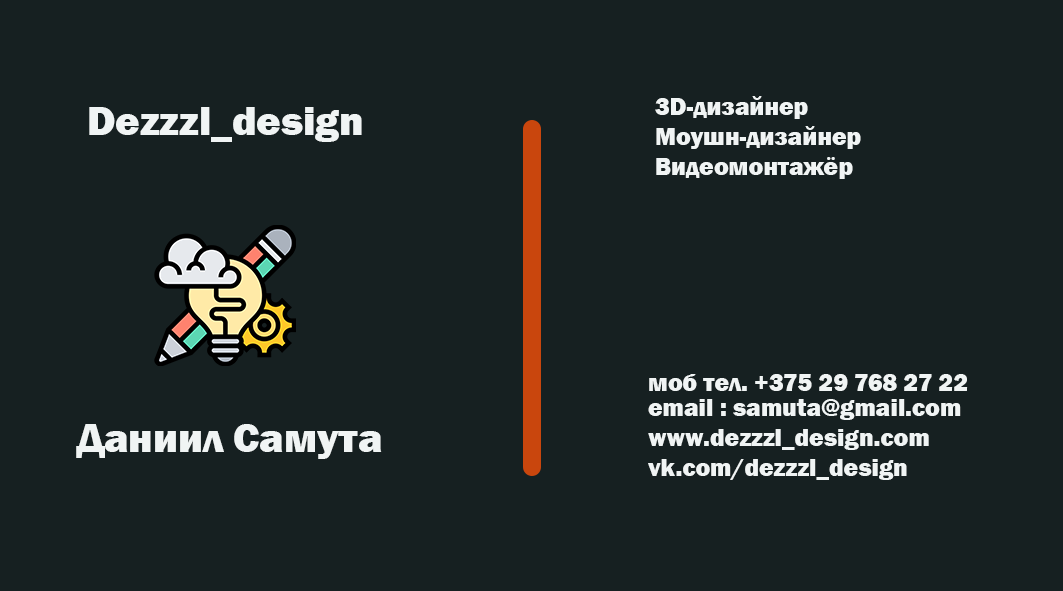
<style>
.page{position:relative;width:1063px;height:591px;background:#162021}
.page>*{position:absolute;margin:0}
.t1{font:25px "FranklinGothic-Heavy";color:#f0f4f4}
.t2{font:41.7px "FranklinGothic-Heavy";color:#f0f4f4}
</style>
<div class="page">
<p class="t1" style="left:655px;top:96px;width:206px;height:83px">3D-дизайнер<br>Моушн-дизайнер<br>Видеомонтажёр</p>
<p class="t2" style="left:89px;top:107px;width:273px;height:35px">Dezzzl_design</p>
<p class="t1" style="left:649px;top:374px;width:319px;height:17px">моб тел. +375 29 768 27 22</p>
<p class="t1" style="left:648px;top:399px;width:313px;height:81px">email : samuta@gmail.com<br>www.dezzzl_design.com<br>vk.com/dezzzl_design</p>
<p class="t2" style="left:76px;top:424px;width:306px;height:35px">Даниил Самута</p>
</div>
